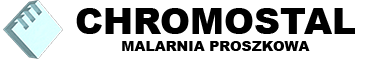
<style>
.page{position:relative;width:372px;height:59px;background:#ffffff}
.page>*{position:absolute;margin:0}
.t1{font:14px "Arial-Black";color:#000000}
.t2{font:36px "Arial-Black";color:#000000}
</style>
<div class="page">
<p class="t1" style="left:76px;top:8px;width:279px;height:43px;text-align:center"><span class="t2">CHROMOSTAL<br></span>MALARNIA PROSZKOWA</p>
</div>
